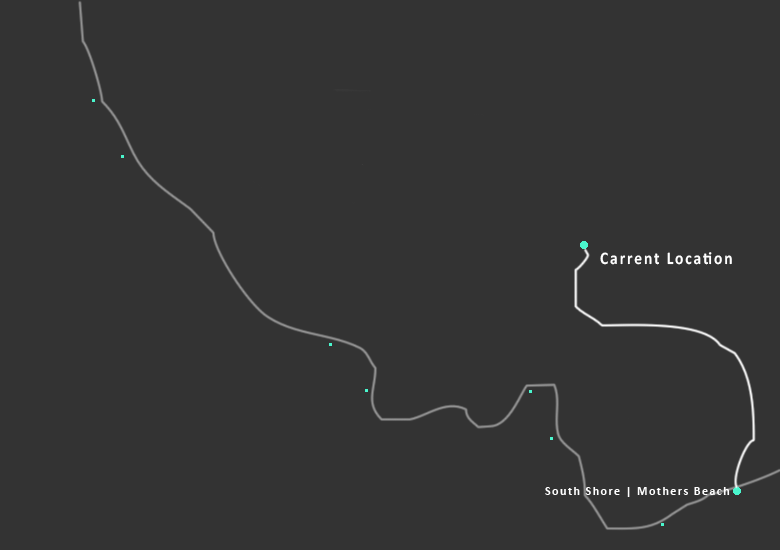
<style>
.page{position:relative;width:780px;height:550px;background:#333333}
.page>*{position:absolute;margin:0}
.t1{font:17.7px "Calibri-Bold";letter-spacing:0.12em;color:#ffffff;scale:0.88 1}
.t2{font:12px "Calibri-Bold";letter-spacing:0.12em;color:#ffffff}
</style>
<div class="page">
<p class="t1" style="left:600px;top:252px;width:132px;height:13px">Carrent Location</p>
<p class="t2" style="left:545px;top:487px;width:185px;height:10px">South Shore | Mothers Beach</p>
</div>
